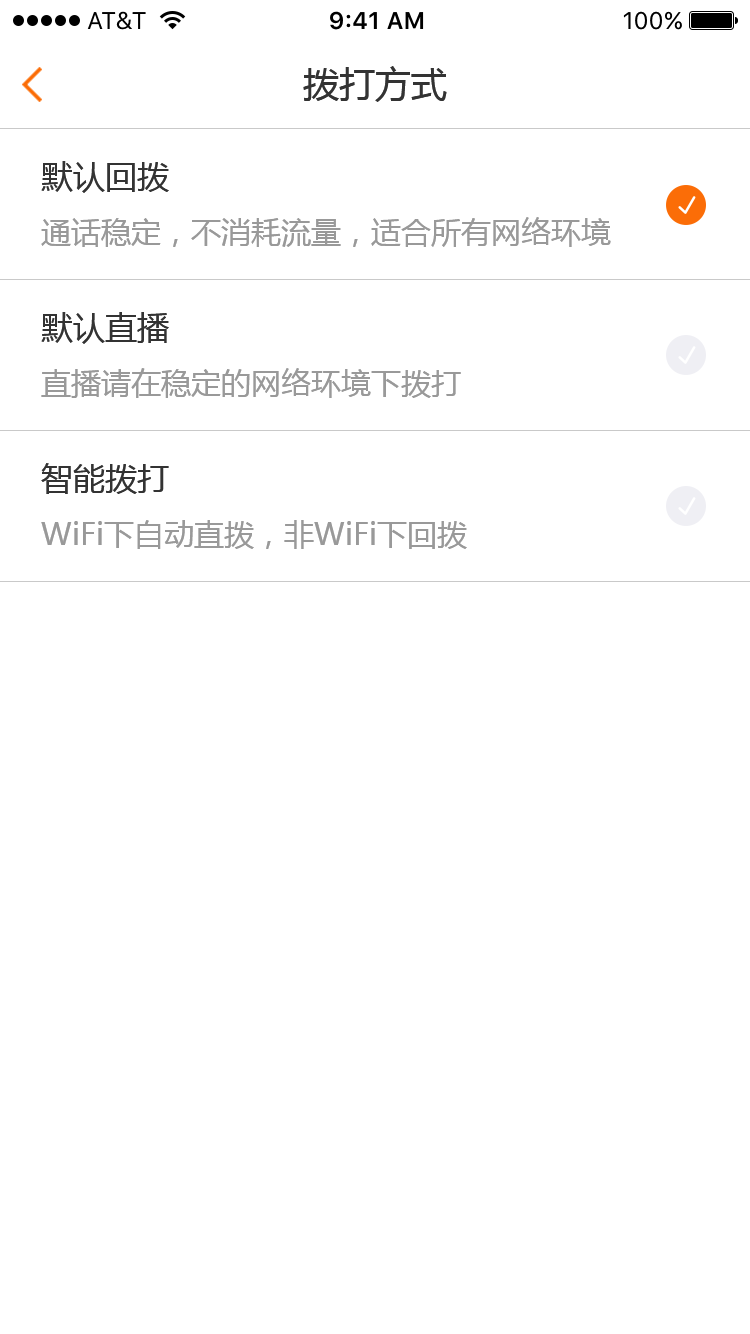
<style>
.page{position:relative;width:750px;height:1334px;background:#ffffff}
.page>*{position:absolute;margin:0}
.t1{font:36px "MicrosoftYaHei";color:#333333}
.t2{font:32px "MicrosoftYaHei";color:#333333}
.t3{font:30px "MicrosoftYaHei";color:#999999}
</style>
<div class="page">
<p class="t1" style="left:303px;top:66px;width:144px;height:36px">拨打方式</p>
<p class="t2" style="left:41px;top:161px;width:128px;height:32px">默认回拨</p>
<p class="t3" style="left:41px;top:217px;width:570px;height:30px">通话稳定，不消耗流量，适合所有网络环境</p>
<p class="t2" style="left:41px;top:312px;width:128px;height:32px">默认直播</p>
<p class="t3" style="left:41px;top:368px;width:420px;height:30px">直播请在稳定的网络环境下拨打</p>
<p class="t2" style="left:41px;top:463px;width:128px;height:31px">智能拨打</p>
<p class="t3" style="left:41px;top:520px;width:426px;height:29px">WiFi下自动直拨，非WiFi下回拨</p>
</div>
